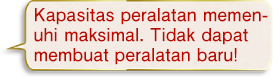
<style>
.page{position:relative;width:274px;height:78px;background:#f4ece4}
.page>*{position:absolute;margin:0}
.t1{font:18px/20px "FutoGoB101Pr5-Bold";color:#bd0800}
</style>
<div class="page">
<p class="t1" style="left:34px;top:8px;width:234px;height:57px">Kapasitas peralatan memen-<br>uhi maksimal. Tidak dapat<br>membuat peralatan baru!</p>
</div>
